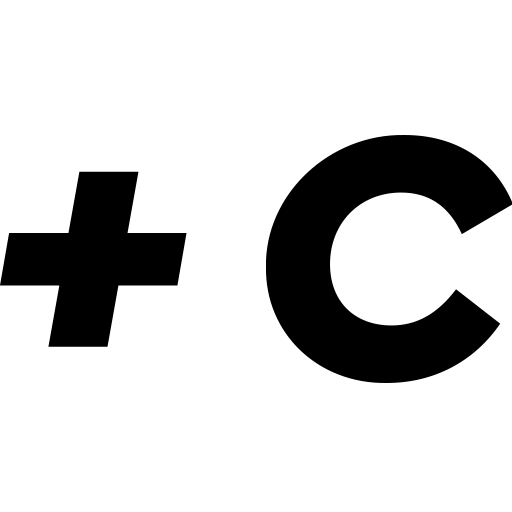
<style>
.page{position:relative;width:512px;height:512px;background:#ffffff}
.page>*{position:absolute;margin:0}
.t1{font:364.3px "CeraPro-BlackItalic";color:#000000}
</style>
<div class="page">
<p class="t1" style="left:265px;top:135px;width:248px;height:248px">C</p>
<p class="t1" style="left:0px;top:171px;width:187px;height:176px">+</p>
</div>
